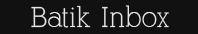
<style>
.page{position:relative;width:198px;height:34px;background:#111111}
.page>*{position:absolute;margin:0}
.t1{font:28px "AlexandriaFLF";color:#e5e5e5}
</style>
<div class="page">
<p class="t1" style="left:31px;top:5px;width:138px;height:23px">Batik Inbox</p>
</div>
